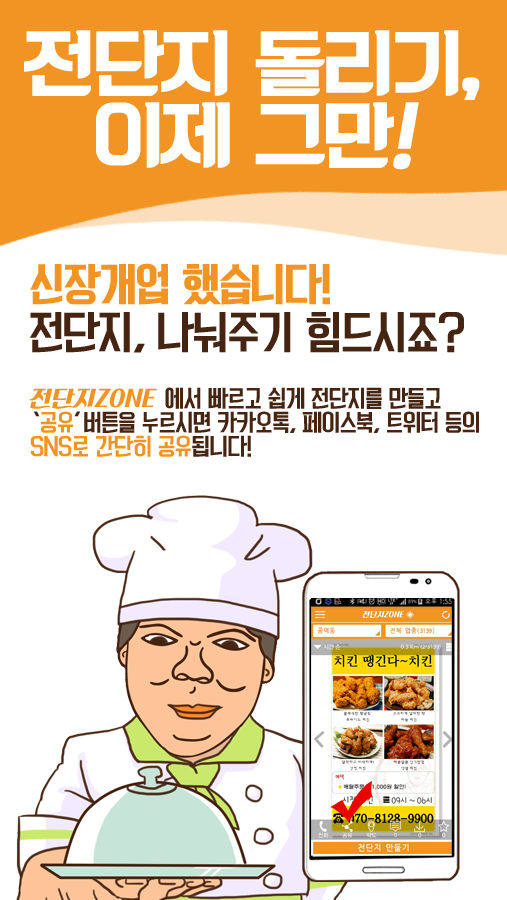
<style>
.page{position:relative;width:507px;height:900px;background:#ffffff}
.page>*{position:absolute;margin:0}
.t1{font:72px/72px "KoreanBLACK-B";letter-spacing:-0.05em;color:#ffffff}
.t2{font:72px/72px "KoreanBLACK-B";letter-spacing:-0.05em;color:#ffffff;font-style:italic}
.t3{font:42px/48px "KoreanYNMYT-M";letter-spacing:-0.05em;color:#462412}
.t4{font:42px/48px "KoreanYNMYT-B";letter-spacing:-0.05em;color:#f29423}
.t5{font:22px/24px "KoreanYNMYT-M";letter-spacing:-0.05em;color:#462412}
.t6{font:22px/24px "KoreanPDSR-R";color:#f29423}
.t7{font:22px/24px "KoreanYNMYT-M";letter-spacing:-0.05em;color:#f29423}
.t8{font:22px/14px "KoreanYNMYT-M";letter-spacing:-0.05em;color:#462412}
</style>
<div class="page">
<p class="t1" style="left:24px;top:30px;width:456px;height:140px;text-align:center">전단지 돌리기,<br>이제 그만<span class="t2">!</span></p>
<p class="t3" style="left:30px;top:263px;width:434px;height:90px"><span class="t4">신장개업 했습니다!<br></span>전단지, 나눠주기 힘드시죠?</p>
<p class="t5" style="left:29px;top:387px;width:450px;height:70px"><span class="t6">전단지ZONE </span>에서 빠르고 쉽게 전단지를 만들고<br>‘<span class="t7">공유</span>’버튼을<span class="t8"> 누르시면 카카오톡, 페이스</span>북, 트위터 등의<br><span class="t7">SNS로 간단히 공유</span>됩니다!</p>
</div>
